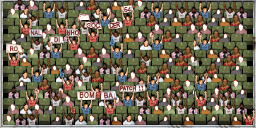
<style>
.page{position:relative;width:256px;height:128px}
.page>*{position:absolute;margin:0}
.t1{font:6.8px "ArialMT";color:#882e2c;text-transform:uppercase;font-weight:bold;scale:0.9 1}
.t2{font:6.4px "ArialMT";color:#882e2c;text-transform:uppercase;font-weight:bold;scale:0.82 1}
.t3{font:6.8px "ArialMT";color:#882e2c;text-transform:uppercase;font-weight:bold;scale:0.86 1}
.t4{font:6.8px "ArialMT";color:#882e2c;text-transform:uppercase;font-weight:bold;scale:0.71 1}
.t5{font:6.4px "ArialMT";letter-spacing:0.1em;color:#882e2c;text-transform:uppercase;font-weight:bold;scale:0.82 1}
.t6{font:5.1px "ArialMT";letter-spacing:0.04em;color:#882e2c;text-transform:uppercase;font-weight:bold;scale:0.88 1}
.t7{font:7.6px "ArialMT";letter-spacing:0.04em;color:#882e2c;text-transform:uppercase;font-weight:bold;scale:0.81 1}
</style>
<div class="page">
<p class="t1" style="left:124px;top:7px;width:7px;height:5px">64</p>
<p class="t2" style="left:30px;top:30px;width:12px;height:6px">nal</p>
<p class="t2" style="left:66px;top:30px;width:13px;height:6px">nho</p>
<p class="t3" style="left:86px;top:23px;width:14px;height:5px">soc</p>
<p class="t4" style="left:109px;top:21px;width:12px;height:8px;rotate:-7deg">cer</p>
<p class="t5" style="left:54px;top:37px;width:6px;height:6px">di</p>
<p class="t2" style="left:10px;top:46px;width:8px;height:6px">ro</p>
<p class="t6" style="left:120px;top:86px;width:16px;height:5px">patch</p>
<p class="t7" style="left:79px;top:92px;width:16px;height:6px">bom</p>
<p class="t7" style="left:104px;top:92px;width:10px;height:7px;rotate:-3deg">ba</p>
</div>
